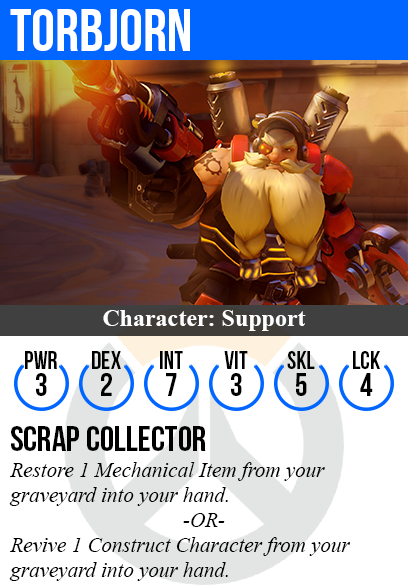
<style>
.page{position:relative;width:408px;height:585px;background:#ffffff}
.page>*{position:absolute;margin:0}
.t1{font:60px "BebasNeue";color:#ffffff}
.t2{font:24px "TimesNewRomanPS-BoldMT";color:#ffffff}
.t3{font:25px "BebasNeue";color:#000000}
.t4{font:32px "BebasNeue";color:#000000}
.t5{font:36px "BebasNeue";color:#000000}
.t6{font:21px "TimesNewRomanPS-ItalicMT";color:#000000}
</style>
<div class="page">
<p class="t1" style="left:10px;top:9px;width:180px;height:42px">torbjorn</p>
<p class="t2" style="left:103px;top:310px;width:203px;height:21px">Character: Support</p>
<p class="t3" style="left:25px;top:351px;width:32px;height:18px">PWR</p>
<p class="t3" style="left:92px;top:351px;width:29px;height:18px">dex</p>
<p class="t3" style="left:160px;top:351px;width:23px;height:18px">int</p>
<p class="t3" style="left:224px;top:351px;width:24px;height:18px">vit</p>
<p class="t3" style="left:287px;top:351px;width:28px;height:18px">skl</p>
<p class="t3" style="left:353px;top:351px;width:27px;height:18px">lck</p>
<p class="t4" style="left:36px;top:373px;width:11px;height:23px">3</p>
<p class="t4" style="left:101px;top:373px;width:11px;height:23px">2</p>
<p class="t4" style="left:166px;top:373px;width:11px;height:23px">7</p>
<p class="t4" style="left:231px;top:373px;width:11px;height:23px">3</p>
<p class="t4" style="left:296px;top:373px;width:11px;height:23px">5</p>
<p class="t4" style="left:360px;top:373px;width:13px;height:23px">4</p>
<p class="t5" style="left:11px;top:426px;width:195px;height:25px">scrap collector</p>
<p class="t6" style="left:9px;top:462px;width:341px;height:119px">Restore 1 Mechanical Item from your<br>graveyard into your hand.<br><br>Revive 1 Construct Character from your<br>graveyard into your hand.</p>
<p class="t6" style="left:183px;top:513px;width:42px;height:14px">-OR-</p>
</div>
